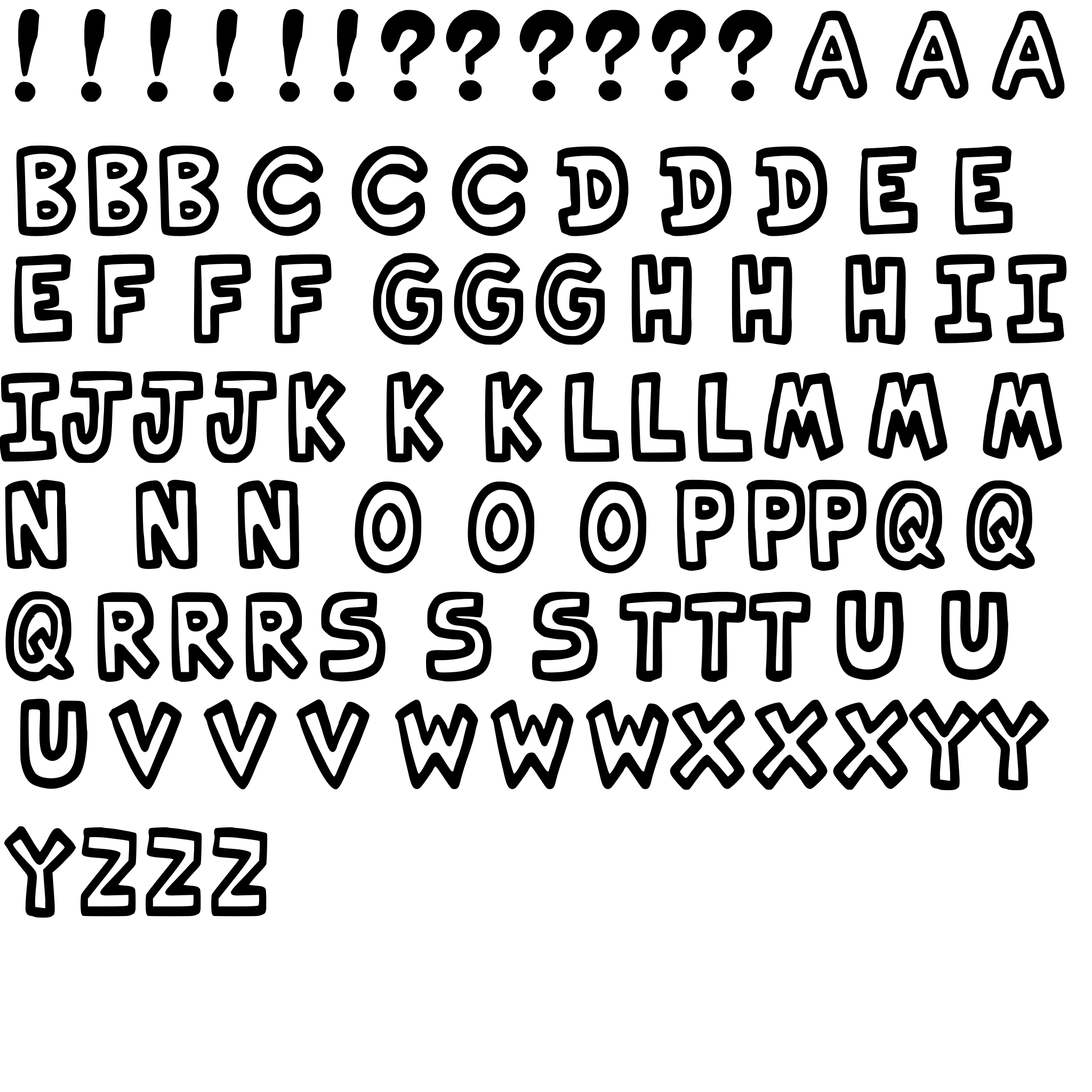
<style>
.page{position:relative;width:1092px;height:1092px;background:#ffffff}
.page>*{position:absolute;margin:0}
.t1{font:115.3px "Muffninja-Regular";color:#000000}
.t2{font:115.3px "Muffninja-Regular";color:#000000;scale:0.8 1}
</style>
<div class="page">
<p class="t1" style="left:15px;top:9px;width:1050px;height:93px">! ! ! ! ! ! ? ????? AAA</p>
<p class="t1" style="left:16px;top:145px;width:997px;height:91px">BBBCCCDDDEE</p>
<p class="t1" style="left:14px;top:253px;width:1053px;height:92px">EFFF GGG H H  H II</p>
<p class="t1" style="left:0px;top:371px;width:1062px;height:92px">IJJJK K K LLLM MM</p>
<p class="t1" style="left:5px;top:479px;width:1030px;height:95px">N  N N  O  O O PPPQQ</p>
<p class="t1" style="left:5px;top:590px;width:1003px;height:92px">QRRRS S STTTUU</p>
<p class="t1" style="left:20px;top:698px;width:1029px;height:92px">UVVV WWWXXXYY</p>
<p class="t2" style="left:4px;top:826px;width:264px;height:92px"><span class="t1">Y</span>ZZZ</p>
</div>
